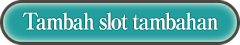
<style>
.page{position:relative;width:240px;height:45px}
.page>*{position:absolute;margin:0}
.t1{font:23px "RyuminPro-ExBold";letter-spacing:-0.08em;color:#ffffff;scale:0.9 1}
</style>
<div class="page">
<p class="t1" style="left:22px;top:12px;width:196px;height:18px">Tambah slot tambahan</p>
</div>
